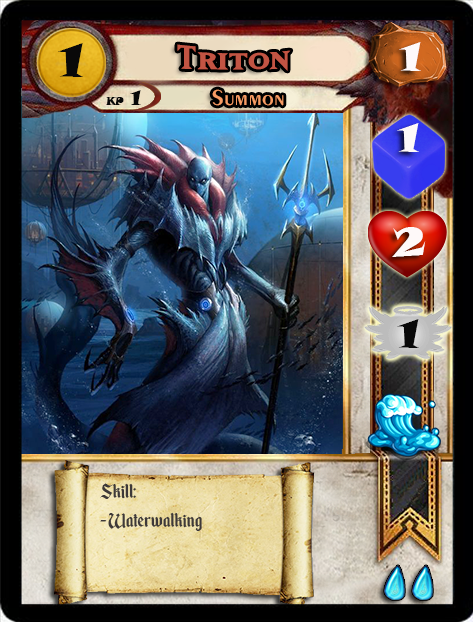
<style>
.page{position:relative;width:473px;height:622px}
.page>*{position:absolute;margin:0}
.t1{font:46.6px "SnapITC-Regular";color:#090909;scale:1.05 1}
.t2{font:40px "MatrixBoldSmallCaps";color:#c25443;scale:1.06 1}
.t3{font:40px "SnapITC-Regular";color:#fef9f9;scale:1.05 1}
.t4{font:22.7px "Exotic350BT-DemiBold";color:#f89c64;scale:1.06 1}
.t5{font:20.5px "SnapITC-Regular";color:#090909}
.t6{font:40px "SnapITC-Regular";color:#090909;scale:1.05 1}
.t7{font:24px "EnchantedLand";color:#3e3939}
</style>
<div class="page">
<p class="t1" style="left:58px;top:43px;width:25px;height:34px">1</p>
<p class="t2" style="left:177px;top:44px;width:114px;height:27px">Triton</p>
<p class="t3" style="left:399px;top:42px;width:22px;height:29px">1</p>
<p class="t4" style="left:212px;top:89px;width:72px;height:17px">Summon</p>
<p class="t5" style="left:130px;top:90px;width:11px;height:15px">1</p>
<p class="t3" style="left:397px;top:123px;width:22px;height:29px">1</p>
<p class="t3" style="left:392px;top:227px;width:34px;height:30px">2</p>
<p class="t6" style="left:397px;top:319px;width:22px;height:29px">1</p>
<p class="t7" style="left:100px;top:483px;width:102px;height:48px">Skill:<br>- Waterwalking</p>
</div>
